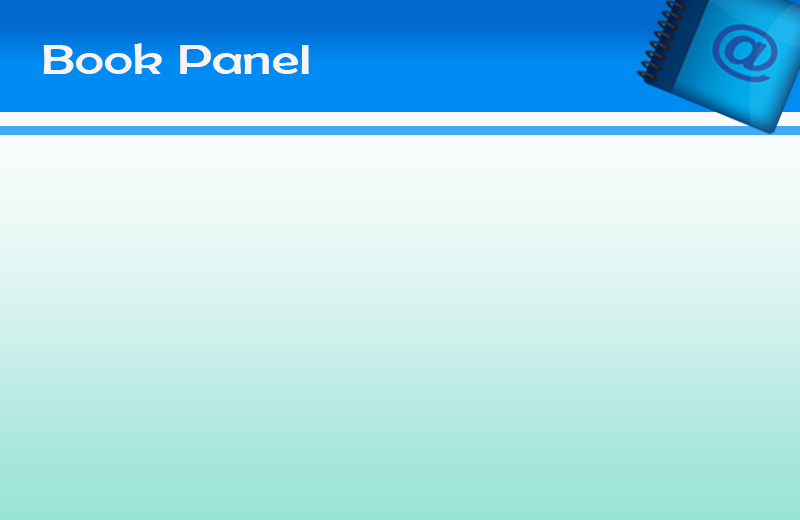
<style>
.page{position:relative;width:800px;height:520px}
.page>*{position:absolute;margin:0}
.t1{font:42.3px "BerlinSansFB-Reg";color:#f8f4f4;scale:1.32 1}
</style>
<div class="page">
<p class="t1" style="left:43px;top:43px;width:266px;height:31px">Book Panel</p>
</div>
